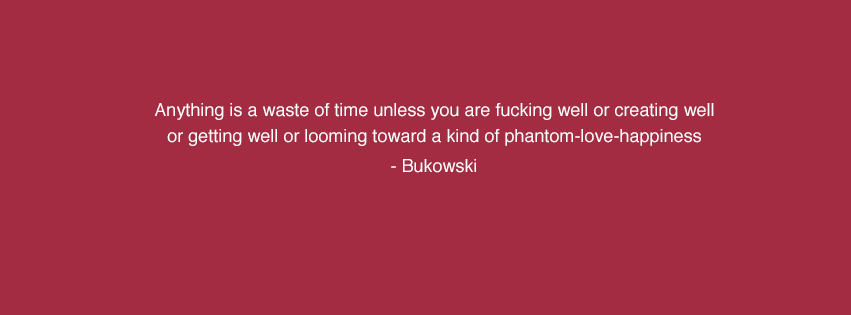
<style>
.page{position:relative;width:851px;height:315px;background:#a32b42}
.page>*{position:absolute;margin:0}
.t1{font:18px/26px "Helvetica";color:#ffffff}
.t2{font:18px "Helvetica";color:#ffffff}
</style>
<div class="page">
<p class="t1" style="left:154px;top:103px;width:560px;height:43px;text-align:center">Anything is a waste of time unless you are fucking well or creating well or getting well or looming toward a kind of phantom-love-happiness</p>
<p class="t2" style="left:391px;top:159px;width:85px;height:14px">- Bukowski</p>
</div>
